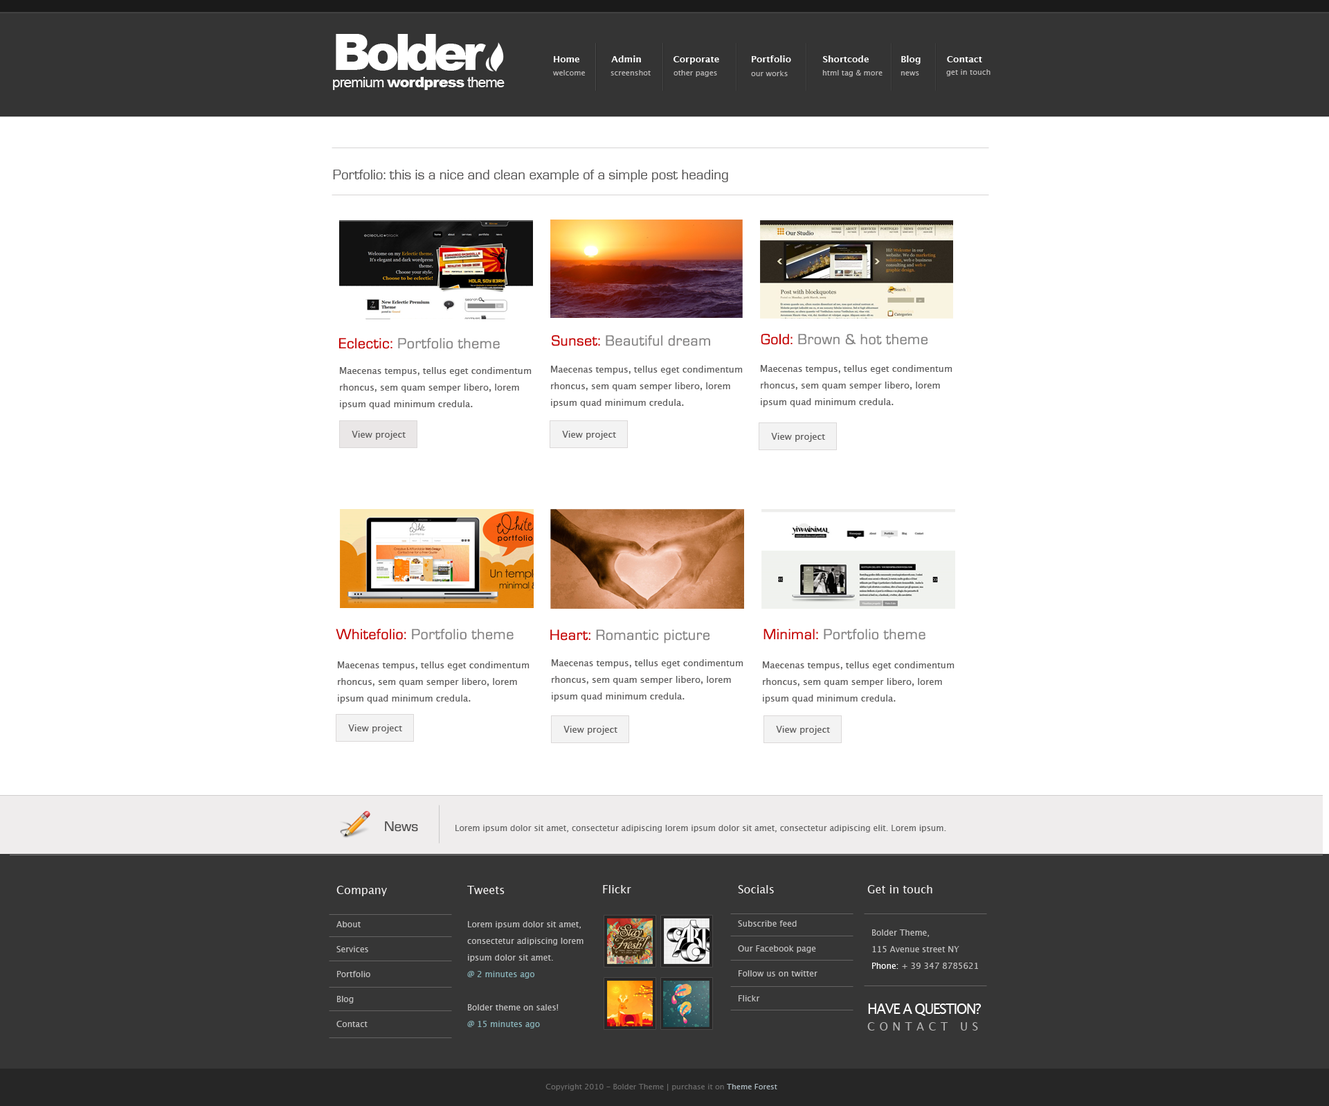
<style>
.page{position:relative;width:1329px;height:1106px;background:#ffffff}
.page>*{position:absolute;margin:0}
.t1{font:14.5px "Arial-Black";letter-spacing:-0.05em;color:#ffffff}
.t2{font:49.8px "Arial-Black";letter-spacing:-0.1em;color:#ffffff}
.t3{font:14.5px "ArialMT";letter-spacing:-0.05em;color:#ffffff}
.t4{font:9px "LucidaSans-Demi";color:#ffffff}
.t5{font:7.6px "LucidaSans";color:#b7b5b5}
.t6{font:14.5px "EurostileRegular";color:#535252}
.t7{font:15.2px "EurostileRegular";letter-spacing:0.025em;color:#858484}
.t8{font:15.2px "EurostileRegular";letter-spacing:0.025em;color:#c40505}
.t9{font:9px/16.6px "LucidaSans";color:#605f5f}
.t10{font:9px "LucidaSans";color:#605f5f}
.t11{font:8.3px "LucidaSans";color:#696969}
.t12{font:8.3px/24.9px "LucidaSans";color:#c0bfbf}
.t13{font:11.1px/16.6px "LucidaSans";color:#f1efef}
.t14{font:8.3px/33.2px "LucidaSans";color:#c0bfbf}
.t15{font:8.3px/16.6px "LucidaSans";color:#c0bfbf}
.t16{font:8.3px/16.6px "LucidaSans";color:#88b3b9}
.t17{font:11.1px "LucidaSans";color:#f1efef}
.t18{font:8.3px/16.6px "LucidaSans";color:#ffffff}
.t19{font:13.8px/33.2px "LucidaSans";letter-spacing:-0.075em;color:#ffffff}
.t20{font:11.1px/16.6px "LucidaSans";letter-spacing:0.4em;color:#b6b5b5}
.t21{font:7.6px "LucidaSans";color:#696969}
.t22{font:7.6px "LucidaSans";color:#abb8bf}
</style>
<div class="page">
<p class="t1" style="left:333px;top:34px;width:172px;height:56px"><span class="t2">Bolder<br></span><span class="t3">premium </span>wordpress<span class="t3"> theme</span></p>
<p class="t4" style="left:554px;top:55px;width:428px;height:9px">Home           Admin           Corporate           Portfolio           Shortcode           Blog         Contact</p>
<p class="t5" style="left:553px;top:70px;width:32px;height:5px">welcome</p>
<p class="t5" style="left:611px;top:70px;width:40px;height:5px">screenshot</p>
<p class="t5" style="left:674px;top:70px;width:43px;height:7px">other pages</p>
<p class="t5" style="left:751px;top:71px;width:37px;height:5px">our works</p>
<p class="t5" style="left:822px;top:70px;width:61px;height:7px">html tag &amp; more</p>
<p class="t5" style="left:901px;top:71px;width:18px;height:4px">news</p>
<p class="t5" style="left:946px;top:69px;width:45px;height:7px">get in touch</p>
<p class="t6" style="left:333px;top:170px;width:395px;height:12px">Portfolio: this is a nice and clean example of a simple post heading</p>
<p class="t7" style="left:339px;top:338px;width:161px;height:11px"><span class="t8">Eclectic: </span>Portfolio theme</p>
<p class="t7" style="left:552px;top:335px;width:158px;height:11px"><span class="t8">Sunset: </span>Beautiful dream</p>
<p class="t7" style="left:761px;top:334px;width:167px;height:11px"><span class="t8">Gold: </span>Brown &amp; hot theme</p>
<p class="t9" style="left:551px;top:366px;width:192px;height:42px">Maecenas tempus, tellus eget condimentum rhoncus, sem quam semper libero, lorem ipsum quad minimum credula.</p>
<p class="t9" style="left:761px;top:365px;width:192px;height:42px">Maecenas tempus, tellus eget condimentum rhoncus, sem quam semper libero, lorem ipsum quad minimum credula.</p>
<p class="t9" style="left:340px;top:367px;width:192px;height:42px">Maecenas tempus, tellus eget condimentum rhoncus, sem quam semper libero, lorem ipsum quad minimum credula.</p>
<p class="t10" style="left:352px;top:431px;width:54px;height:9px">View project</p>
<p class="t10" style="left:562px;top:431px;width:54px;height:9px">View project</p>
<p class="t10" style="left:771px;top:433px;width:54px;height:9px">View project</p>
<p class="t7" style="left:336px;top:629px;width:178px;height:11px"><span class="t8">Whitefolio: </span>Portfolio theme</p>
<p class="t7" style="left:550px;top:629px;width:160px;height:14px"><span class="t8">Heart: </span>Romantic picture</p>
<p class="t7" style="left:764px;top:629px;width:162px;height:11px"><span class="t8">Minimal: </span>Portfolio theme</p>
<p class="t9" style="left:338px;top:661px;width:192px;height:42px">Maecenas tempus, tellus eget condimentum rhoncus, sem quam semper libero, lorem ipsum quad minimum credula.</p>
<p class="t9" style="left:552px;top:659px;width:192px;height:42px">Maecenas tempus, tellus eget condimentum rhoncus, sem quam semper libero, lorem ipsum quad minimum credula.</p>
<p class="t9" style="left:763px;top:661px;width:192px;height:42px">Maecenas tempus, tellus eget condimentum rhoncus, sem quam semper libero, lorem ipsum quad minimum credula.</p>
<p class="t10" style="left:348px;top:724px;width:54px;height:9px">View project</p>
<p class="t10" style="left:564px;top:726px;width:54px;height:9px">View project</p>
<p class="t10" style="left:776px;top:726px;width:54px;height:9px">View project</p>
<p class="t6" style="left:385px;top:821px;width:33px;height:10px">News</p>
<p class="t11" style="left:456px;top:825px;width:490px;height:7px">Lorem ipsum dolor sit amet, consectetur adipiscing lorem ipsum dolor sit amet, consectetur adipiscing elit. Lorem ipsum.</p>
<p class="t12" style="left:336px;top:885px;width:51px;height:142px"><span class="t13">Company<br></span><span class="t14">About<br></span>Services<br>Portfolio<br>Blog<br>Contact</p>
<p class="t15" style="left:467px;top:885px;width:117px;height:143px"><span class="t13">Tweets<br></span><span class="t14">Lorem ipsum dolor sit amet, </span>consectetur adipiscing lorem ipsum dolor sit amet.<br><span class="t16">@ 2 minutes ago<br></span><span class="t14">Bolder theme on sales!<br></span><span class="t16">@ 15 minutes ago</span></p>
<p class="t17" style="left:603px;top:885px;width:28px;height:8px">Flickr</p>
<p class="t12" style="left:738px;top:885px;width:80px;height:116px"><span class="t13">Socials<br></span><span class="t14">Subscribe feed<br></span>Our Facebook page<br>Follow us on twitter<br>Flickr</p>
<p class="t17" style="left:867px;top:885px;width:66px;height:8px">Get in touch</p>
<p class="t15" style="left:872px;top:929px;width:106px;height:40px"><span class="t13"><br></span><span class="t14">Bolder Theme,<br></span>115 Avenue street NY<br><span class="t18">Phone:</span> + 39 347 8785621</p>
<p class="t19" style="left:867px;top:1003px;width:115px;height:27px">HAVE A QUESTION?<br><span class="t20">CONTACT US</span></p>
<p class="t21" style="left:546px;top:1083px;width:231px;height:7px">Copyright 2010 - Bolder Theme | purchase it on <span class="t22">Theme Forest</span></p>
</div>
